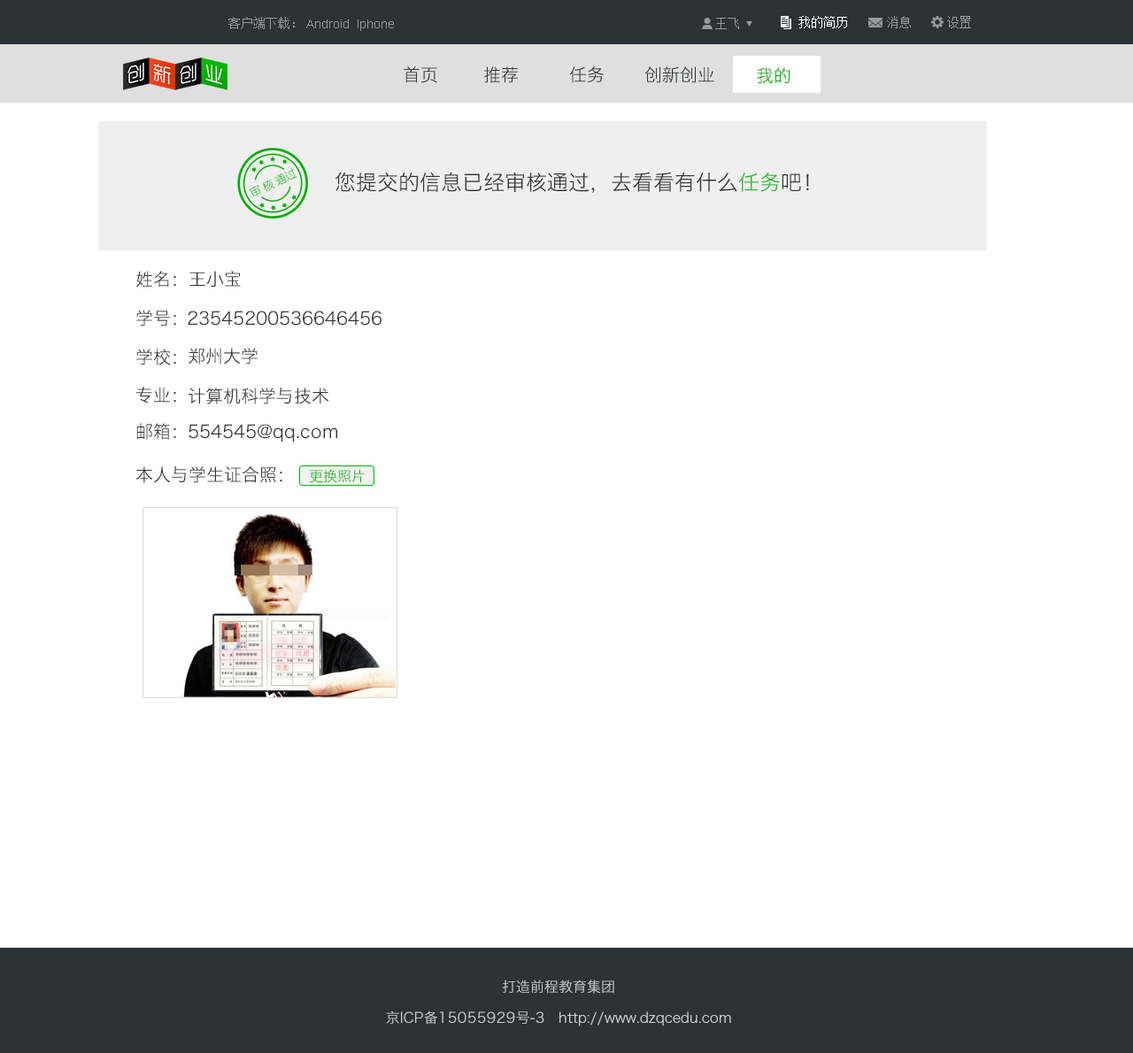
<style>
.page{position:relative;width:1133px;height:1053px;background:#ffffff}
.page>*{position:absolute;margin:0}
.t1{font:12.4px "SimSun";color:#999999}
.t2{font:12.4px "SimSun";color:#ffffff}
.t3{font:12.4px "ArialMT";color:#999999}
.t4{font:17.7px "HiraginoSansGB-W3";color:#333333}
.t5{font:17.7px "HiraginoSansGB-W3";color:#2d3235}
.t6{font:17.7px "HiraginoSansGB-W3";color:#03aa02}
.t7{font:21.2px "HiraginoSansGB-W3";color:#333333}
.t8{font:21.2px "HiraginoSansGB-W3";color:#2db92d}
.t9{font:14.2px "HiraginoSansGB-W3";color:#00b300}
.t10{font:14.2px "HiraginoSansGB-W3";color:#cccccc}
</style>
<div class="page">
<p class="t1" style="left:228px;top:17px;width:67px;height:12px">客户端下载：</p>
<p class="t1" style="left:715px;top:18px;width:24px;height:11px">王飞</p>
<p class="t2" style="left:798px;top:16px;width:49px;height:12px">我的简历</p>
<p class="t1" style="left:887px;top:16px;width:23px;height:12px">消息</p>
<p class="t1" style="left:947px;top:16px;width:24px;height:12px">设置</p>
<p class="t3" style="left:306px;top:19px;width:88px;height:12px">Android  Iphone</p>
<p class="t4" style="left:403px;top:66px;width:34px;height:17px">首页</p>
<p class="t4" style="left:484px;top:66px;width:34px;height:17px">推荐</p>
<p class="t4" style="left:569px;top:66px;width:34px;height:17px">任务</p>
<p class="t5" style="left:644px;top:66px;width:70px;height:17px">创新创业</p>
<p class="t6" style="left:756px;top:67px;width:34px;height:17px">我的</p>
<p class="t7" style="left:334px;top:172px;width:475px;height:21px">您提交的信息已经审核通过，去看看有什么<span class="t8">任务</span>吧！</p>
<p class="t4" style="left:136px;top:271px;width:40px;height:17px">姓名：</p>
<p class="t4" style="left:189px;top:271px;width:52px;height:16px">王小宝</p>
<p class="t4" style="left:136px;top:310px;width:40px;height:16px">学号：</p>
<p class="t4" style="left:188px;top:311px;width:193px;height:15px">23545200536646456</p>
<p class="t4" style="left:136px;top:349px;width:40px;height:16px">学校：</p>
<p class="t4" style="left:188px;top:348px;width:69px;height:17px">郑州大学</p>
<p class="t4" style="left:136px;top:387px;width:40px;height:16px">专业：</p>
<p class="t4" style="left:188px;top:388px;width:141px;height:16px">计算机科学与技术</p>
<p class="t4" style="left:136px;top:423px;width:40px;height:17px">邮箱：</p>
<p class="t4" style="left:188px;top:424px;width:149px;height:18px">554545@qq.com</p>
<p class="t4" style="left:135px;top:466px;width:147px;height:17px">本人与学生证合照：</p>
<p class="t9" style="left:309px;top:469px;width:56px;height:14px">更换照片</p>
<p class="t10" style="left:502px;top:979px;width:112px;height:15px">打造前程教育集团</p>
<p class="t10" style="left:386px;top:1010px;width:345px;height:16px">京ICP备15055929号-3   http://www.dzqcedu.com</p>
</div>
